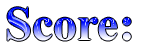
<style>
.page{position:relative;width:150px;height:50px;background:#ffffff}
.page>*{position:absolute;margin:0}
.t1{font:48px "TimesNewRomanPS-BoldMT"}
</style>
<div class="page">
<p class="t1" style="left:7px;top:7px;width:124px;height:34px">Score:</p>
</div>
